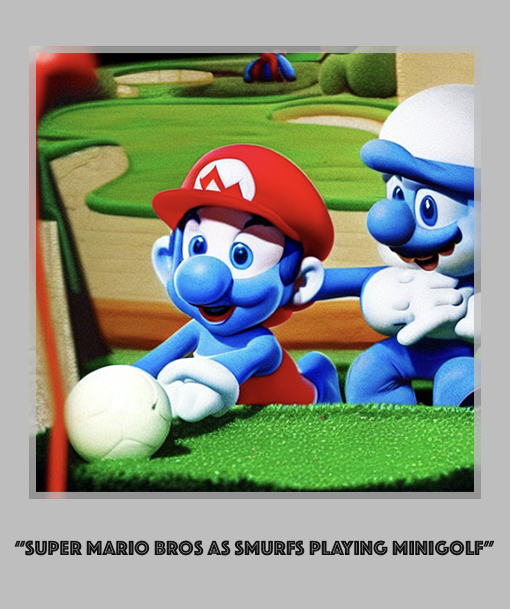
<style>
.page{position:relative;width:510px;height:609px;background:#bebebe}
.page>*{position:absolute;margin:0}
.t1{font:21.2px "Phosphate-Inline";color:#121111}
</style>
<div class="page">
<p class="t1" style="left:14px;top:540px;width:481px;height:16px">“Super Mario Bros as Smurfs playing MiniGolf”</p>
</div>
